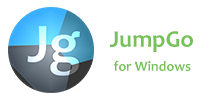
<style>
.page{position:relative;width:210px;height:100px;background:#ffffff}
.page>*{position:absolute;margin:0}
.t1{font:24px "Candara-Bold";color:#77c159}
.t2{font:14px "Candara-Bold";color:#77c159}
</style>
<div class="page">
<p class="t1" style="left:109px;top:31px;width:84px;height:21px">JumpGo</p>
<p class="t2" style="left:113px;top:60px;width:78px;height:11px">for Windows</p>
</div>
